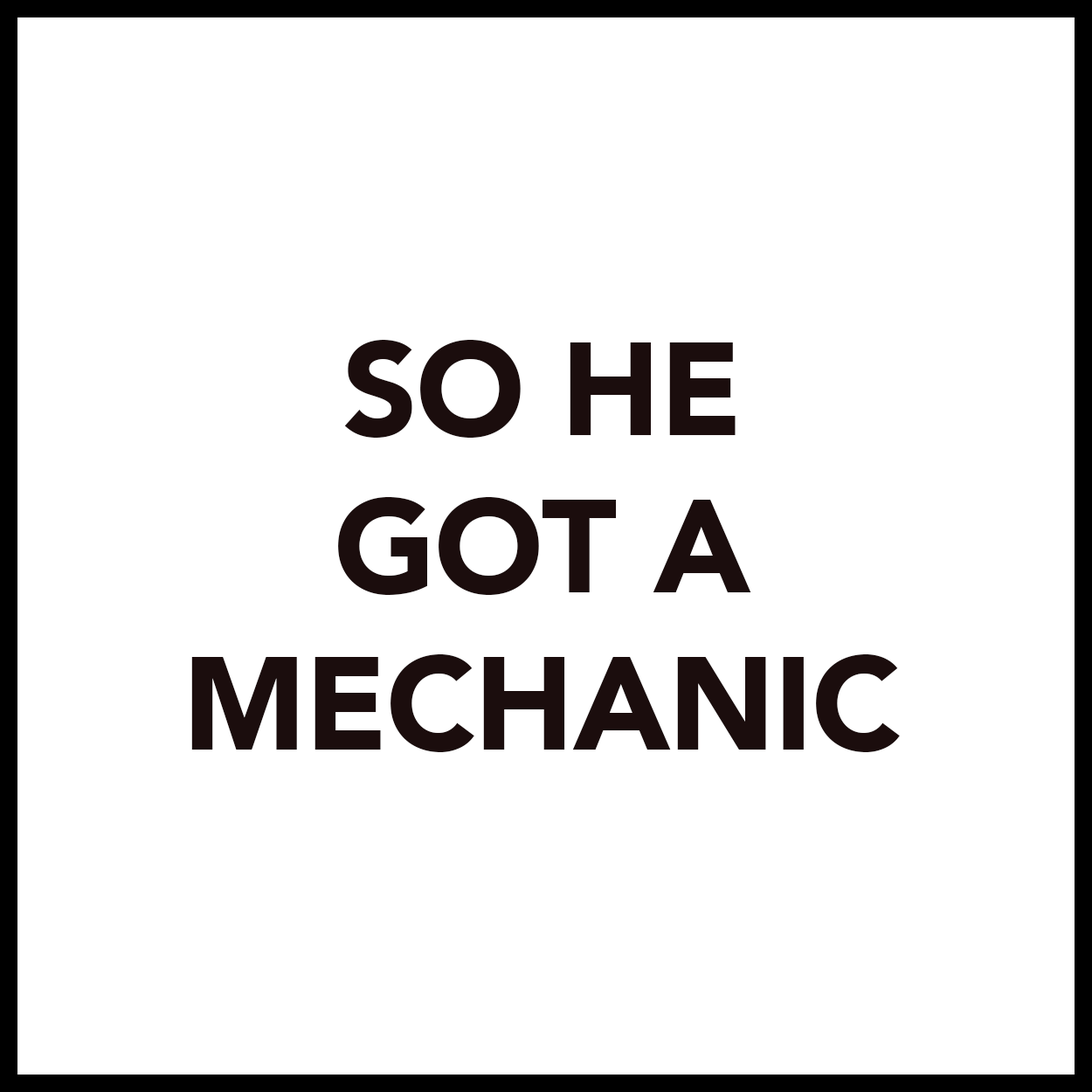
<style>
.page{position:relative;width:1092px;height:1092px;background:#ffffff}
.page>*{position:absolute;margin:0}
.t1{font:131px "Avenir-Black";letter-spacing:-0.01em;color:#1b0d0d}
</style>
<div class="page">
<p class="t1" style="left:191px;top:340px;width:709px;height:412px;text-align:center">SO HE<br>GOT A<br>MECHANIC</p>
</div>
